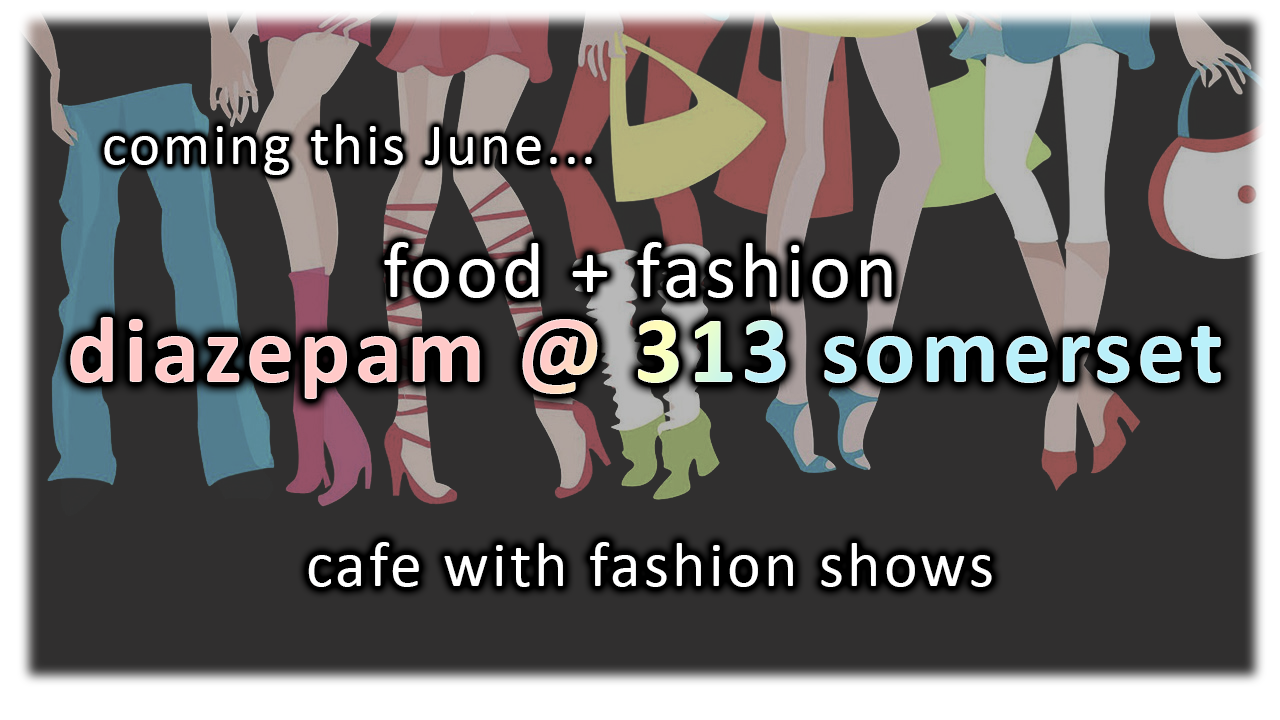
<style>
.page{position:relative;width:1280px;height:720px;background:#302f2f}
.page>*{position:absolute;margin:0}
.t1{font:58.7px "Calibri";letter-spacing:0.05em;color:#ffffff}
.t2{font:80px "Calibri";letter-spacing:0.05em;color:#ffffff}
.t3{font:96px "Calibri-Bold";letter-spacing:0.05em}
.t4{font:64px "Calibri";letter-spacing:0.05em;color:#ffffff}
</style>
<div class="page">
<p class="t1" style="left:104px;top:124px;width:488px;height:51px">coming this June...</p>
<p class="t2" style="left:384px;top:242px;width:508px;height:56px">food + fashion</p>
<p class="t3" style="left:70px;top:317px;width:1151px;height:82px">diazepam @ 313 somerset</p>
<p class="t4" style="left:308px;top:542px;width:684px;height:45px">cafe with fashion shows</p>
</div>
